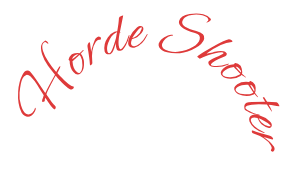
<style>
.page{position:relative;width:300px;height:170px;background:#ffffff}
.page>*{position:absolute;margin:0}
.t1{font:64px/40px "Ephesis-Regular";color:#de3a3a}
</style>
<div class="page">
<p class="t1" style="left:17px;top:12px;width:263px;height:140px;text-align:right">Horde Shooter</p>
</div>
